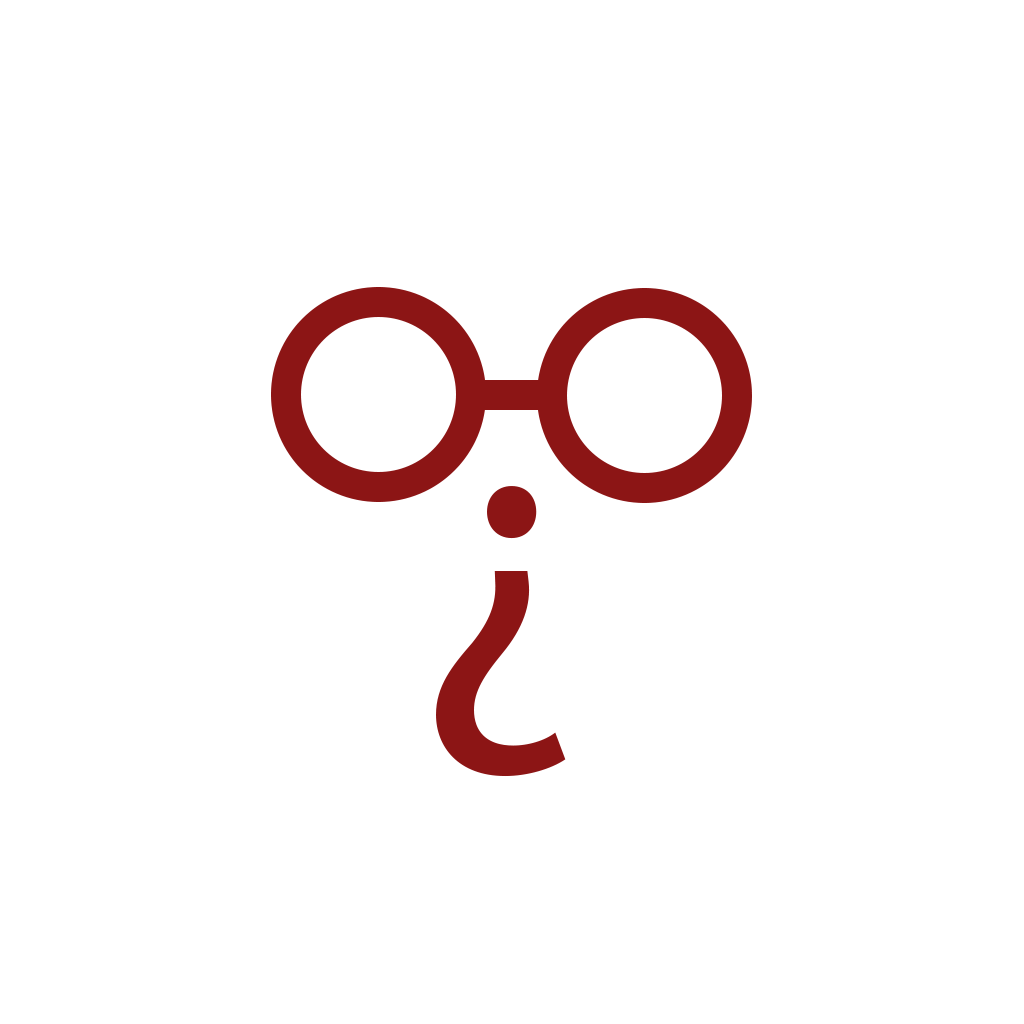
<style>
.page{position:relative;width:1024px;height:1024px;background:#ffffff}
.page>*{position:absolute;margin:0}
.t1{font:416.7px "MyriadPro-Regular";color:#8c1515}
</style>
<div class="page">
<p class="t1" style="left:436px;top:486px;width:130px;height:291px">¿</p>
</div>
